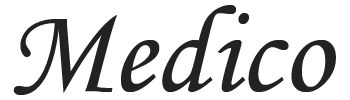
<style>
.page{position:relative;width:350px;height:100px;background:#ffffff}
.page>*{position:absolute;margin:0}
.t1{font:125px "MonotypeCorsiva";color:#222222}
</style>
<div class="page">
<p class="t1" style="left:13px;top:5px;width:323px;height:90px">Medico</p>
</div>
